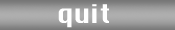
<style>
.page{position:relative;width:175px;height:30px}
.page>*{position:absolute;margin:0}
.t1{font:25px "Silom";color:#ffffff}
</style>
<div class="page">
<p class="t1" style="left:58px;top:4px;width:51px;height:24px">quit</p>
</div>
